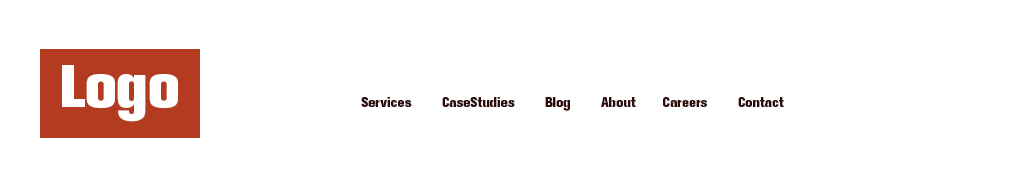
<style>
.page{position:relative;width:1020px;height:189px;background:#ffffff}
.page>*{position:absolute;margin:0}
.t1{font:60px "AkzidenzGroteskBE-XBd";color:#ffffff}
.t2{font:14px "AkzidenzGroteskBE-XBd";color:#2e0c0c}
</style>
<div class="page">
<p class="t1" style="left:62px;top:65px;width:116px;height:57px">Logo</p>
<p class="t2" style="left:361px;top:97px;width:423px;height:14px">Services        CaseStudies        Blog        About       Careers        Contact</p>
</div>
